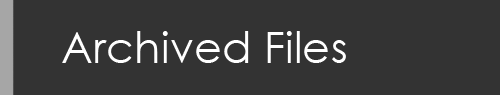
<style>
.page{position:relative;width:500px;height:95px;background:#333333}
.page>*{position:absolute;margin:0}
.t1{font:43.5px "CenturyGothic";color:#ffffff}
</style>
<div class="page">
<p class="t1" style="left:62px;top:31px;width:284px;height:32px">Archived Files</p>
</div>
